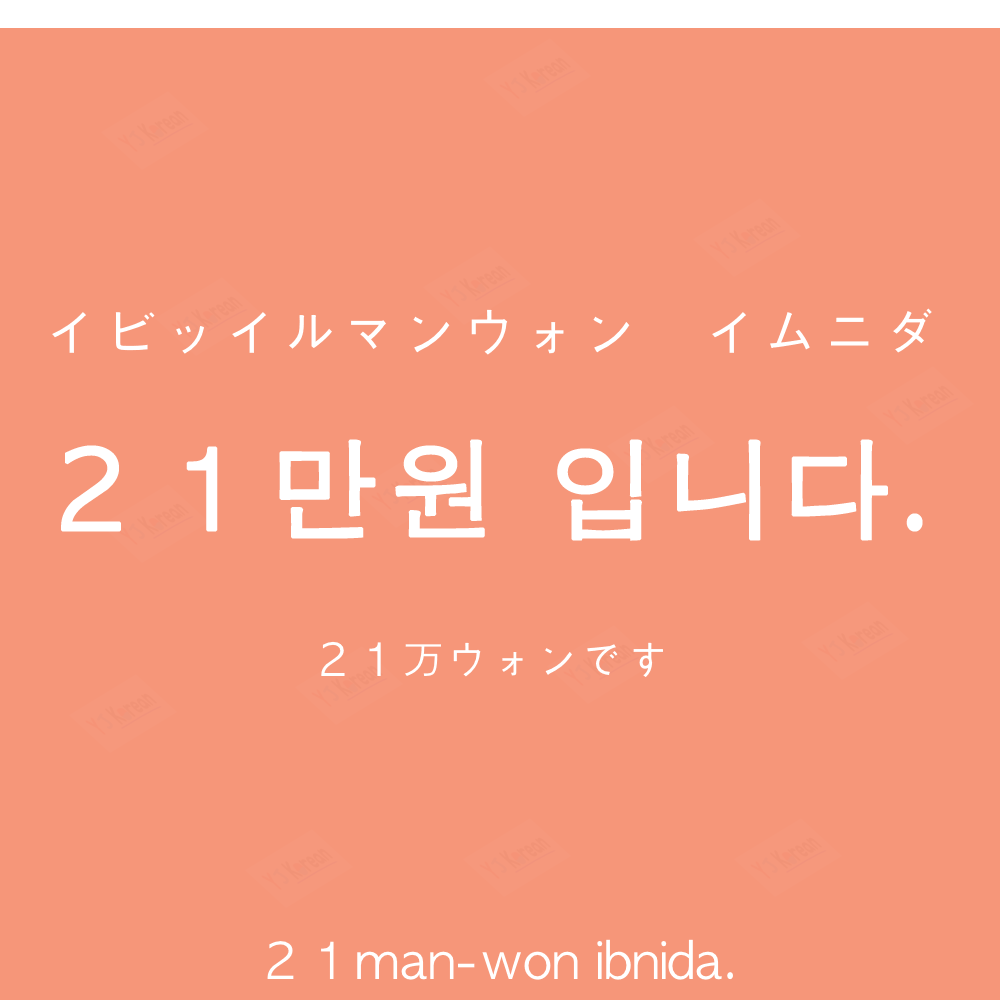
<style>
.page{position:relative;width:1000px;height:1000px;background:#f69679}
.page>*{position:absolute;margin:0}
.t1{font:60px "AppleGothic";color:#ffffff}
.t2{font:110px "AppleGothic";letter-spacing:0.04em;color:#ffffff;font-weight:bold}
.t3{font:45px "AppleGothic";color:#ffffff}
.t4{font:50px "AppleGothic";color:#ffffff}
</style>
<div class="page">
<p class="t1" style="left:52px;top:308px;width:880px;height:47px">イビッイルマンウォン　イムニダ</p>
<p class="t2" style="left:61px;top:439px;width:862px;height:102px">２１만원 입니다.</p>
<p class="t3" style="left:321px;top:641px;width:342px;height:36px">２１万ウォンです</p>
<p class="t4" style="left:267px;top:939px;width:466px;height:41px">２１man-won ibnida.</p>
</div>
